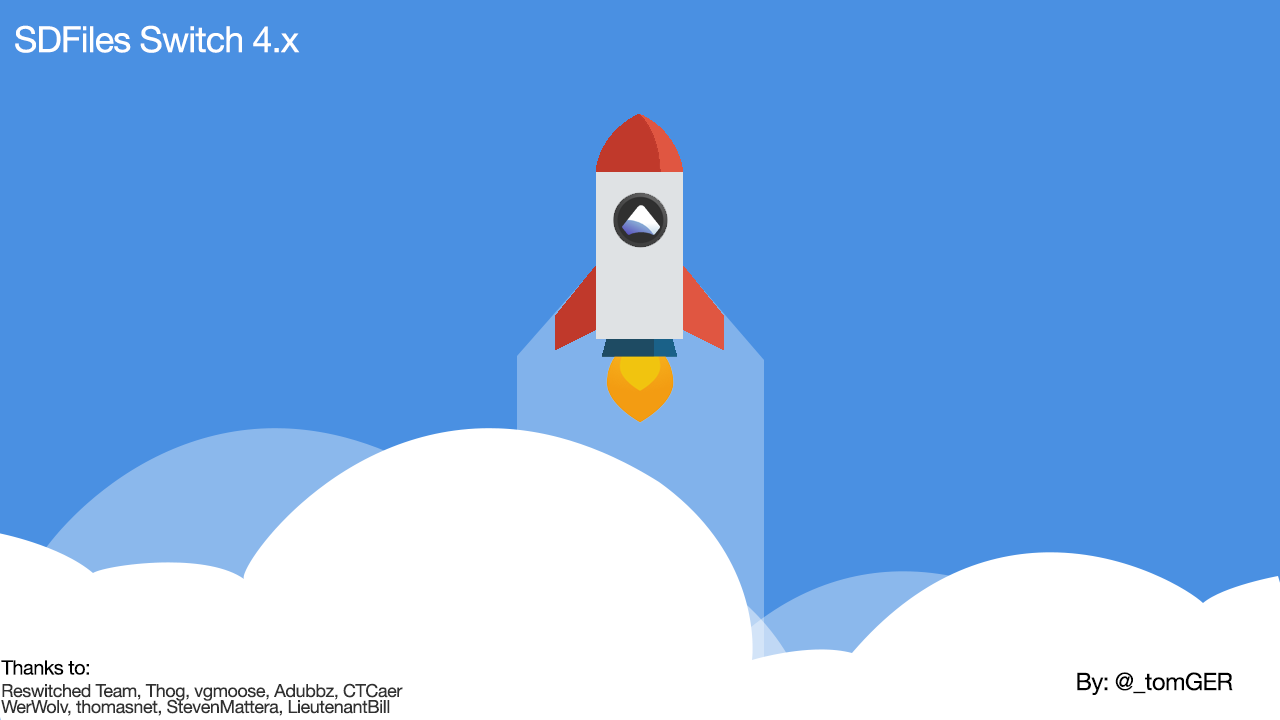
<style>
.page{position:relative;width:1280px;height:720px;background:#4a90e2}
.page>*{position:absolute;margin:0}
.t1{font:36px "HelveticaNeue";letter-spacing:-0.025em;color:#ffffff}
.t2{font:20px "HelveticaNeue";letter-spacing:-0.025em;color:#000000}
.t3{font:24px "HelveticaNeue";letter-spacing:-0.025em;color:#000000}
.t4{font:18px/16px "HelveticaNeue";letter-spacing:-0.025em;color:#313131}
</style>
<div class="page">
<p class="t1" style="left:15px;top:25px;width:285px;height:28px">SDFiles Switch 4.x</p>
<p class="t2" style="left:1px;top:660px;width:88px;height:15px">Thanks to:</p>
<p class="t3" style="left:1077px;top:672px;width:156px;height:23px">By: @_tomGER</p>
<p class="t4" style="left:1px;top:683px;width:402px;height:33px">Reswitched Team, Thog, vgmoose, Adubbz, CTCaer<br>WerWolv, thomasnet, StevenMattera, LieutenantBill</p>
</div>
